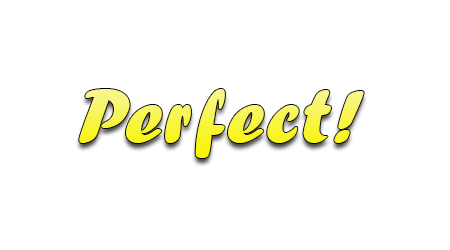
<style>
.page{position:relative;width:450px;height:250px;background:#ffffff}
.page>*{position:absolute;margin:0}
.t1{font:80px "ForteMT";letter-spacing:0.005em;scale:1.13 1}
</style>
<div class="page">
<p class="t1" style="left:79px;top:89px;width:285px;height:69px">Perfect!</p>
</div>
